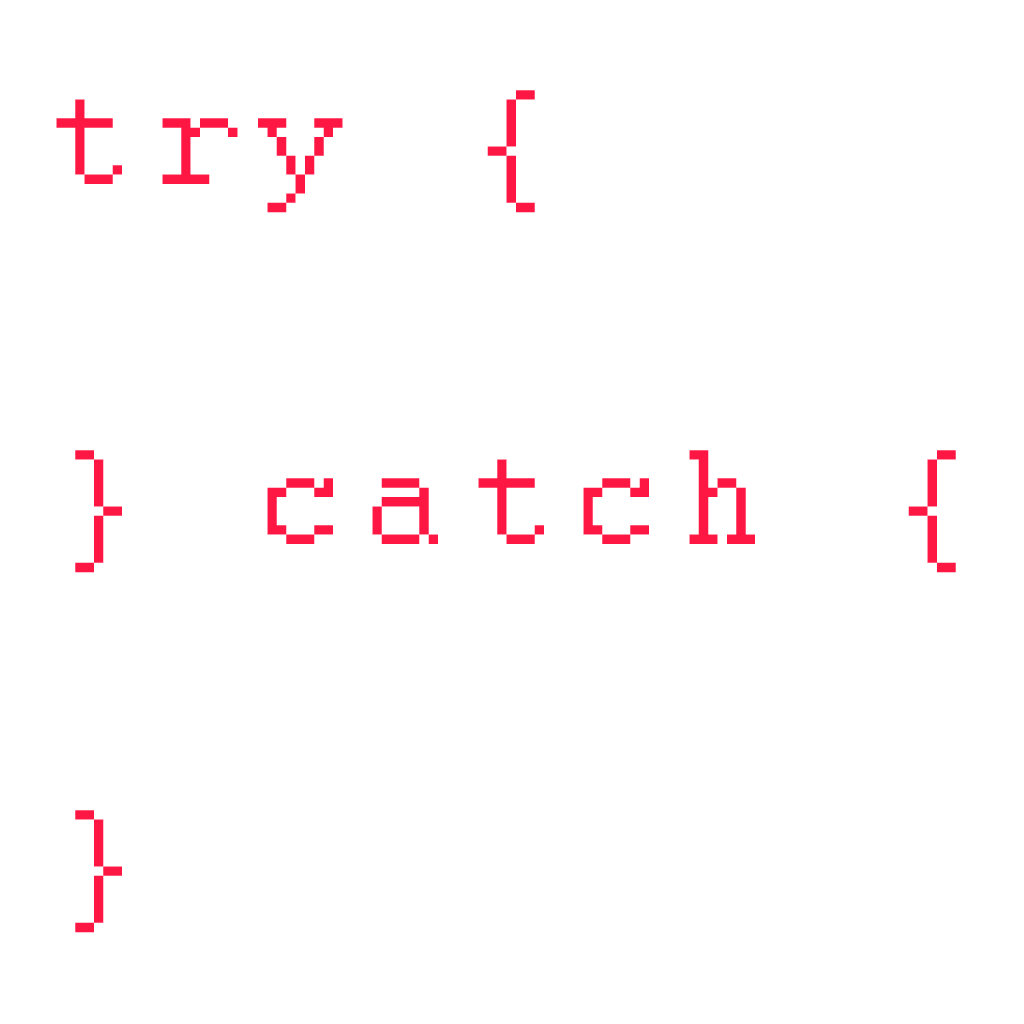
<style>
.page{position:relative;width:1024px;height:1024px;background:#ffffff}
.page>*{position:absolute;margin:0}
.t1{font:150px "Courier";letter-spacing:0.14em;color:#ff1744}
</style>
<div class="page">
<p class="t1" style="left:56px;top:90px;width:900px;height:843px">try {<br><br>} catch {<br><br>}</p>
</div>
